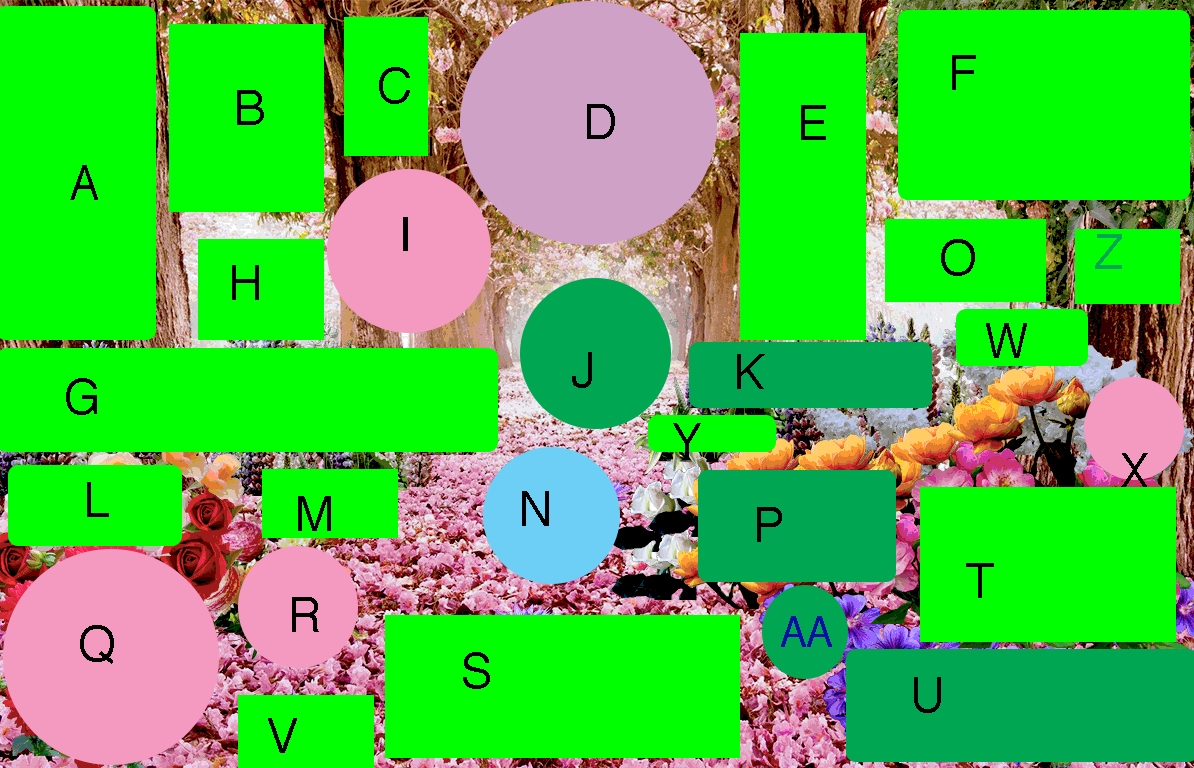
<style>
.page{position:relative;width:1194px;height:768px;background:#00ff00}
.page>*{position:absolute;margin:0}
.t1{font:48px "Helvetica";letter-spacing:-0.025em;color:#000000}
.t2{font:48px "Helvetica";letter-spacing:-0.025em;color:#00a651}
.t3{font:42px "Helvetica";letter-spacing:-0.025em;color:#0010a6;scale:0.95 1}
</style>
<div class="page">
<p class="t1" style="left:952px;top:55px;width:24px;height:35px">F</p>
<p class="t1" style="left:379px;top:67px;width:31px;height:37px">C</p>
<p class="t1" style="left:237px;top:90px;width:27px;height:35px">B</p>
<p class="t1" style="left:587px;top:104px;width:28px;height:35px">D</p>
<p class="t1" style="left:801px;top:105px;width:25px;height:35px">E</p>
<p class="t1" style="left:70px;top:165px;width:28px;height:35px">A</p>
<p class="t1" style="left:941px;top:239px;width:34px;height:37px">O</p>
<p class="t2" style="left:1095px;top:234px;width:27px;height:35px">Z</p>
<p class="t1" style="left:232px;top:265px;width:27px;height:35px">H</p>
<p class="t1" style="left:986px;top:323px;width:41px;height:35px">W</p>
<p class="t1" style="left:572px;top:352px;width:20px;height:36px">J</p>
<p class="t1" style="left:737px;top:354px;width:28px;height:35px">K</p>
<p class="t1" style="left:66px;top:378px;width:31px;height:37px">G</p>
<p class="t1" style="left:673px;top:423px;width:28px;height:35px">Y</p>
<p class="t1" style="left:1121px;top:453px;width:27px;height:35px">X</p>
<p class="t1" style="left:87px;top:482px;width:22px;height:35px">L</p>
<p class="t1" style="left:298px;top:496px;width:33px;height:35px">M</p>
<p class="t1" style="left:522px;top:491px;width:27px;height:35px">N</p>
<p class="t1" style="left:757px;top:507px;width:25px;height:35px">P</p>
<p class="t1" style="left:966px;top:563px;width:28px;height:35px">T</p>
<p class="t1" style="left:292px;top:597px;width:27px;height:35px">R</p>
<p class="t3" style="left:781px;top:616px;width:51px;height:31px">AA</p>
<p class="t1" style="left:80px;top:625px;width:34px;height:39px">Q</p>
<p class="t1" style="left:463px;top:652px;width:27px;height:37px">S</p>
<p class="t1" style="left:914px;top:677px;width:27px;height:36px">U</p>
<p class="t1" style="left:268px;top:718px;width:29px;height:35px">V</p>
</div>
